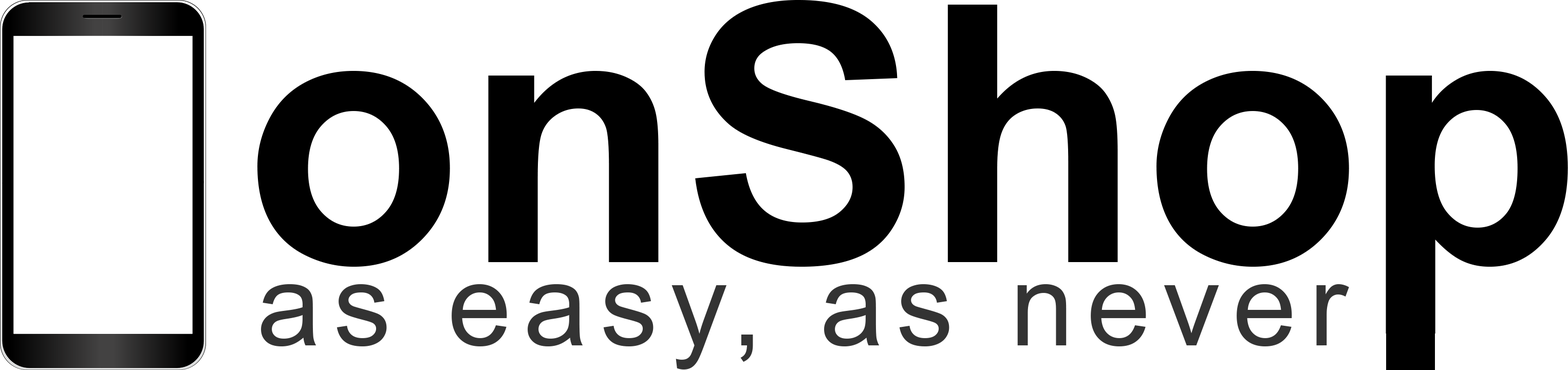
<style>
.page{position:relative;width:1568px;height:370px;background:#ffffff}
.page>*{position:absolute;margin:0}
.t1{font:359.6px "Arial-BoldMT";color:#000000}
.t2{font:115.1px "ArialMT";letter-spacing:0.107em;color:#333333}
</style>
<div class="page">
<p class="t1" style="left:257px;top:0px;width:1311px;height:333px">onShop</p>
<p class="t2" style="left:261px;top:284px;width:1088px;height:85px">as easy, as never</p>
</div>
